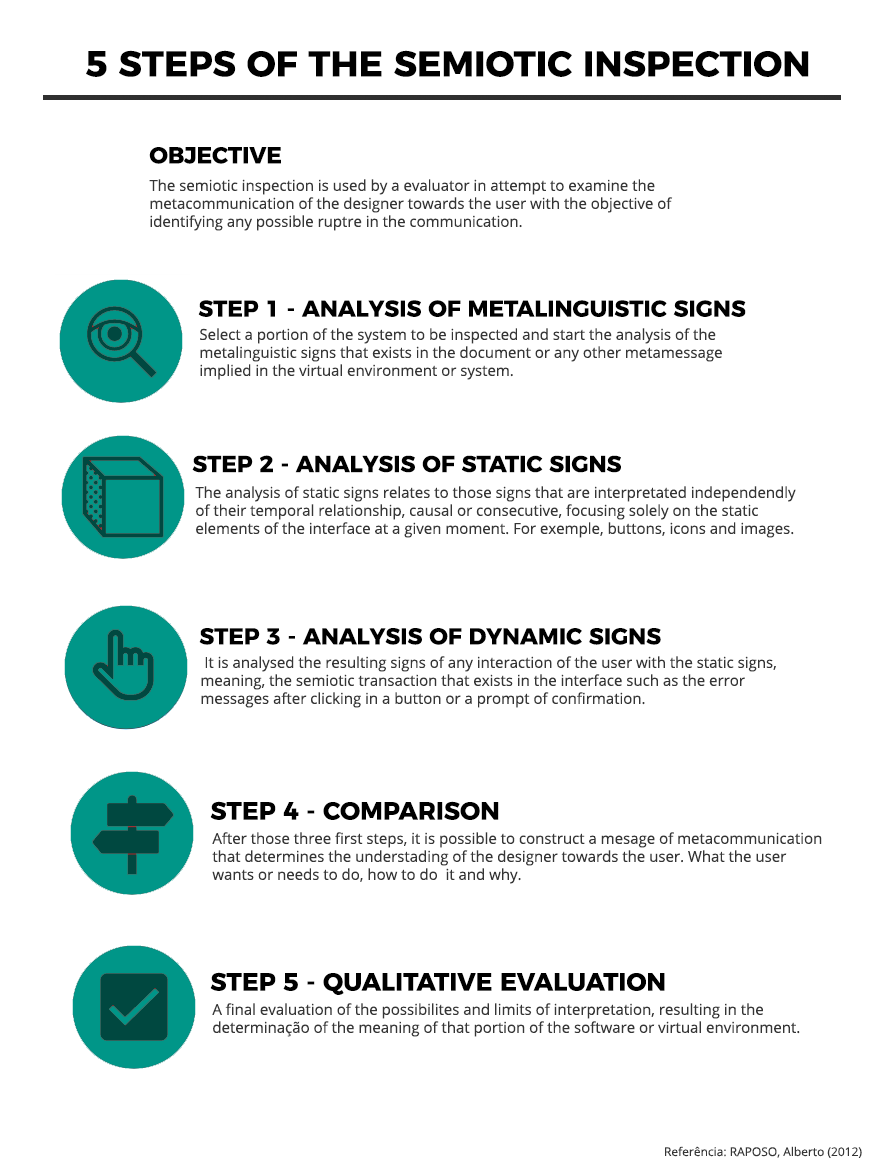
<style>
.page{position:relative;width:880px;height:1161px;background:#ffffff}
.page>*{position:absolute;margin:0}
.t1{font:36px "Montserrat-Bold";color:#000000}
.t2{font:23px "Montserrat-Bold";color:#000000}
.t3{font:15px/18px "OpenSans";color:#353535}
.t4{font:25px "Montserrat-Bold";color:#000000}
.t5{font:12px "OpenSans";color:#353535}
</style>
<div class="page">
<p class="t1" style="left:86px;top:50px;width:723px;height:27px">5 STEPS OF THE SEMIOTIC INSPECTION</p>
<p class="t2" style="left:149px;top:147px;width:132px;height:17px">OBJECTIVE</p>
<p class="t3" style="left:149px;top:179px;width:524px;height:52px">The semiotic inspection is used by a evaluator in attempt to examine the <br>metacommunication of the designer towards the user with the objective of <br>identifying any possible ruptre in the communication.</p>
<p class="t2" style="left:198px;top:300px;width:548px;height:17px">STEP 1 - ANALYSIS OF METALINGUISTIC SIGNS</p>
<p class="t3" style="left:200px;top:328px;width:522px;height:52px">Select a portion of the system to be inspected and start the analysis of the <br>metalinguistic signs that exists in the document or any other metamessage <br>implied in the virtual environment or system.</p>
<p class="t2" style="left:192px;top:455px;width:429px;height:18px">STEP 2 - ANALYSIS OF STATIC SIGNS</p>
<p class="t3" style="left:195px;top:486px;width:601px;height:52px">The analysis of static signs relates to those signs that are interpretated independendly<br>of their temporal relationship, causal or consecutive, focusing solely on the static<br>elements of the interface at a given moment. For exemple, buttons, icons and images.</p>
<p class="t2" style="left:199px;top:628px;width:462px;height:17px">STEP 3 - ANALYSIS OF DYNAMIC SIGNS</p>
<p class="t3" style="left:201px;top:656px;width:575px;height:52px">It is analysed the resulting signs of any interaction of the user with the static signs,<br>meaning, the semiotic transaction that exists in the interface such as the error<br>messages after clicking in a button or a prompt of confirmation.</p>
<p class="t4" style="left:210px;top:801px;width:289px;height:19px">STEP 4 - COMPARISON</p>
<p class="t3" style="left:212px;top:832px;width:610px;height:52px">After those three first steps, it is possible to construct a mesage of metacommunication<br>that determines the understading of the designer towards the user. What the user<br>wants or needs to do, how to do  it and why.</p>
<p class="t4" style="left:210px;top:972px;width:455px;height:23px">STEP 5 - QUALITATIVE EVALUATION</p>
<p class="t3" style="left:212px;top:1003px;width:588px;height:34px">A final evaluation of the possibilites and limits of interpretation, resulting in the <br>determinação of the meaning of that portion of the software or virtual environment.</p>
<p class="t5" style="left:665px;top:1146px;width:197px;height:12px">Referência: RAPOSO, Alberto (2012)</p>
</div>
